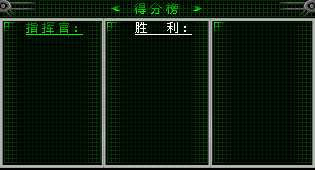
<style>
.page{position:relative;width:315px;height:170px;background:#000000}
.page>*{position:absolute;margin:0}
.t1{font:12px "MicrosoftYaHei"}
.t2{font:12px "MicrosoftYaHei";text-decoration:underline}
.t3{font:12px "MicrosoftYaHei";color:#fefefe;text-decoration:underline}
</style>
<div class="page">
<p class="t1" style="left:134px;top:3px;width:44px;height:11px">得 分 榜</p>
<p class="t2" style="left:26px;top:22px;width:57px;height:13px">指 挥 官：</p>
<p class="t3" style="left:135px;top:22px;width:57px;height:13px">胜     利：</p>
</div>
